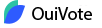
<style>
.page{position:relative;width:102px;height:28px;background:#ffffff}
.page>*{position:absolute;margin:0}
.t1{font:18px "MyriadPro-Regular";color:#000000}
</style>
<div class="page">
<p class="t1" style="left:32px;top:7px;width:60px;height:13px">OuiVote</p>
</div>
